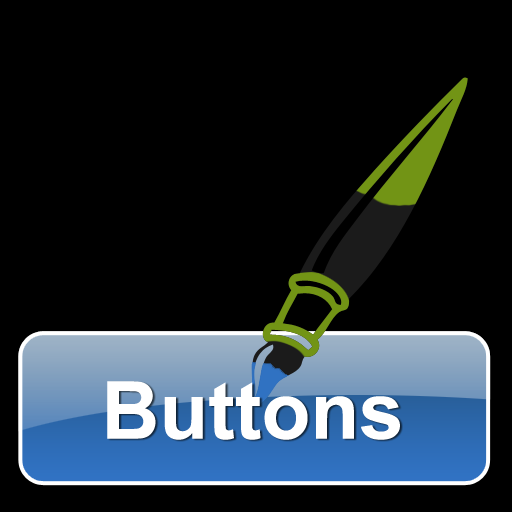
<style>
.page{position:relative;width:512px;height:512px;background:#000000}
.page>*{position:absolute;margin:0}
.t1{font:80px "Arial-BoldMT";color:#ffffff}
</style>
<div class="page">
<p class="t1" style="left:107px;top:381px;width:293px;height:59px">Buttons</p>
</div>
